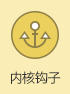
<style>
.page{position:relative;width:70px;height:94px;background:#faedb6}
.page>*{position:absolute;margin:0}
.t1{font:13px "MicrosoftYaHei";color:#323232}
</style>
<div class="page">
<p class="t1" style="left:11px;top:71px;width:50px;height:13px">内核钩子</p>
</div>
